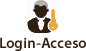
<style>
.page{position:relative;width:86px;height:51px;background:#ffffff}
.page>*{position:absolute;margin:0}
.t1{font:15px "MyriadPro-Semibold";color:#30210e}
</style>
<div class="page">
<p class="t1" style="left:0px;top:37px;width:86px;height:14px">Login-Acceso</p>
</div>
